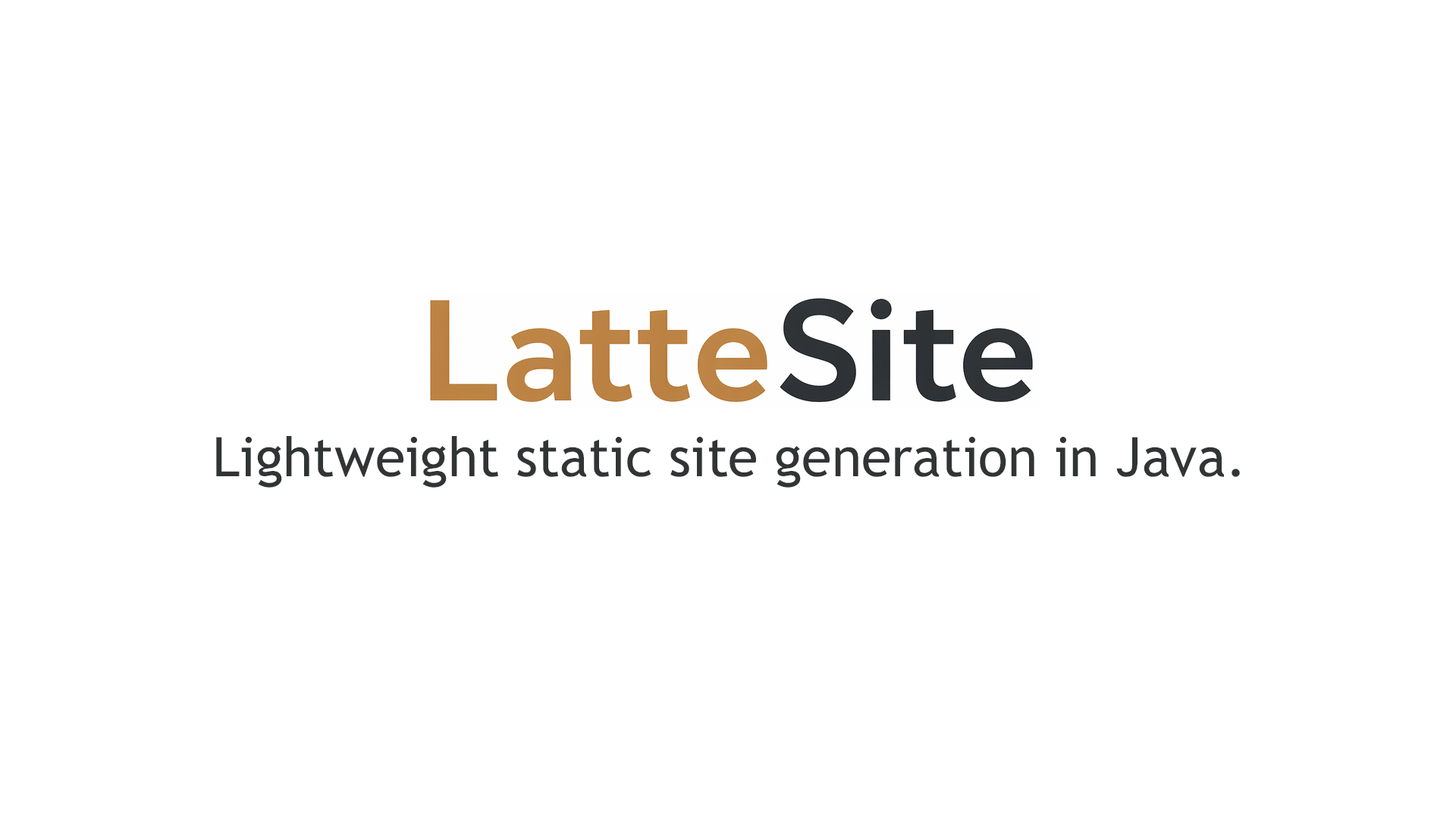
<style>
.page{position:relative;width:1456px;height:819px;background:#ffffff}
.page>*{position:absolute;margin:0}
.t1{font:54.6px "TrebuchetMS";color:#313435}
</style>
<div class="page">
<p class="t1" style="left:216px;top:436px;width:1024px;height:52px">Lightweight static site generation in Java.</p>
</div>
